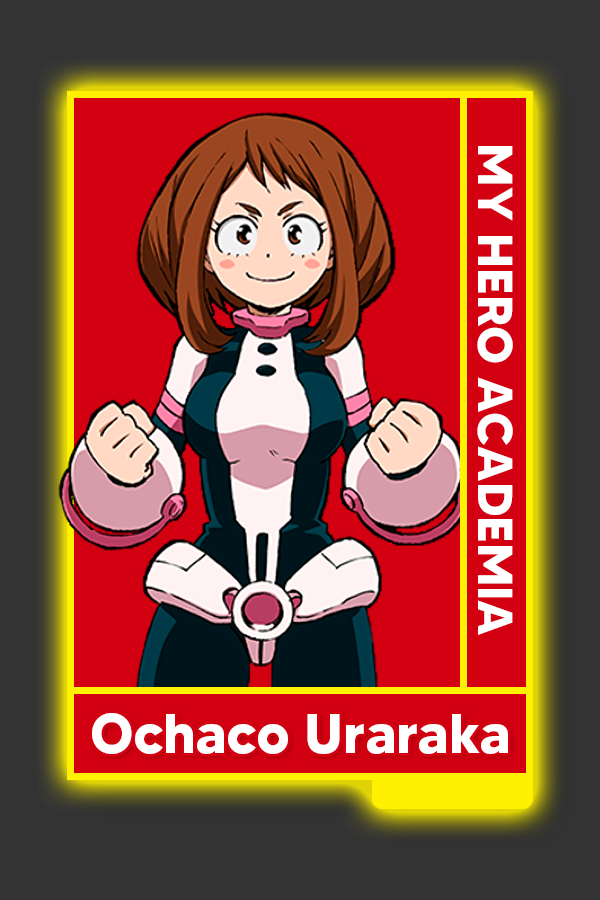
<style>
.page{position:relative;width:600px;height:900px;background:#d20010}
.page>*{position:absolute;margin:0}
.t1{font:48.8px "MADETOMMY-Bold";color:#ffffff}
.t2{font:55.4px "MADETOMMY-Bold";color:#ffffff}
</style>
<div class="page">
<p class="t1" style="left:477px;top:146px;width:36px;height:489px;rotate:90deg">MY HERO ACADEMIA</p>
<p class="t2" style="left:92px;top:713px;width:416px;height:41px">Ochaco Uraraka</p>
</div>
